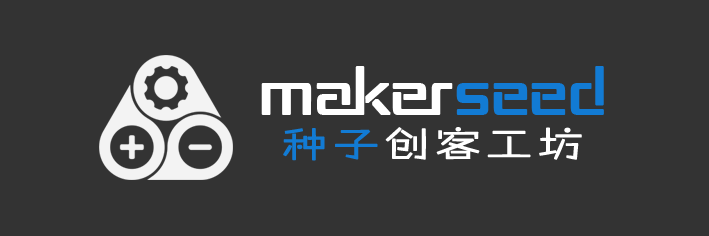
<style>
.page{position:relative;width:709px;height:236px;background:#333333}
.page>*{position:absolute;margin:0}
.t1{font:55.7px "RepublikaII";color:#ffffff;font-weight:bold}
.t2{font:55.7px "RepublikaII";color:#127bd4;font-weight:bold}
.t3{font:34.3px "FZZHYJW--GB1-0";letter-spacing:0.12em;color:#ffffff;font-weight:bold;scale:1.3 1}
.t4{font:34.3px "FZZHYJW--GB1-0";letter-spacing:0.12em;color:#127bd4;font-weight:bold;scale:1.3 1}
</style>
<div class="page">
<p class="t1" style="left:261px;top:66px;width:343px;height:49px">MAKER<span class="t2">SEED</span></p>
<p class="t3" style="left:283px;top:127px;width:299px;height:34px"><span class="t4">种子</span>创客工坊</p>
</div>
